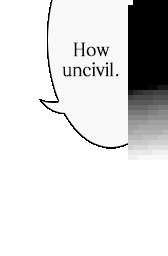
<style>
.page{position:relative;width:168px;height:256px;background:#ffffff}
.page>*{position:absolute;margin:0}
.t1{font:18.2px "MatissePro-M";letter-spacing:-0.025em;color:#000000;font-weight:bold;scale:0.91 1}
.t2{font:18.2px "MatissePro-M";letter-spacing:-0.01em;color:#000000;font-weight:bold;scale:0.91 1}
.t3{font:18.2px "MatissePro-M";letter-spacing:-0.05em;color:#000000;font-weight:bold;scale:0.91 1}
</style>
<div class="page">
<p class="t1" style="left:62px;top:42px;width:57px;height:35px;text-align:center"><span class="t2">How<br></span>uncivil<span class="t3">.</span></p>
</div>
